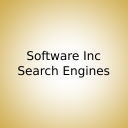
<style>
.page{position:relative;width:128px;height:128px}
.page>*{position:absolute;margin:0}
.t1{font:12px "DejaVuSans";color:#000000}
</style>
<div class="page">
<p class="t1" style="left:18px;top:50px;width:92px;height:28px;text-align:center">Software Inc<br>Search Engines</p>
</div>
